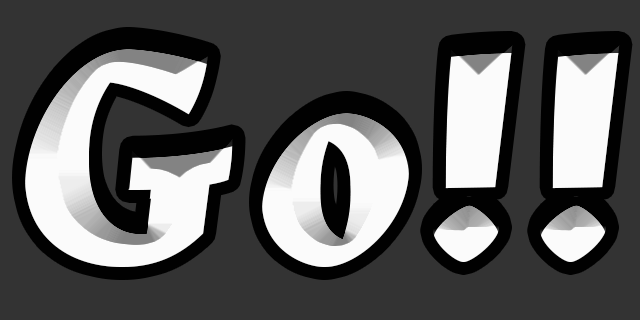
<style>
.page{position:relative;width:640px;height:320px;background:#333333}
.page>*{position:absolute;margin:0}
.t1{font:319.6px "ArekLatn-EbIt";letter-spacing:0.025em;color:#ffffff}
</style>
<div class="page">
<p class="t1" style="left:25px;top:40px;width:595px;height:228px">Go!!</p>
</div>
